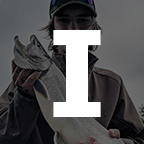
<style>
.page{position:relative;width:144px;height:144px}
.page>*{position:absolute;margin:0}
.t1{font:120px "Tahoma-Bold";color:#ffffff}
</style>
<div class="page">
<p class="t1" style="left:53px;top:30px;width:48px;height:87px">I</p>
</div>
